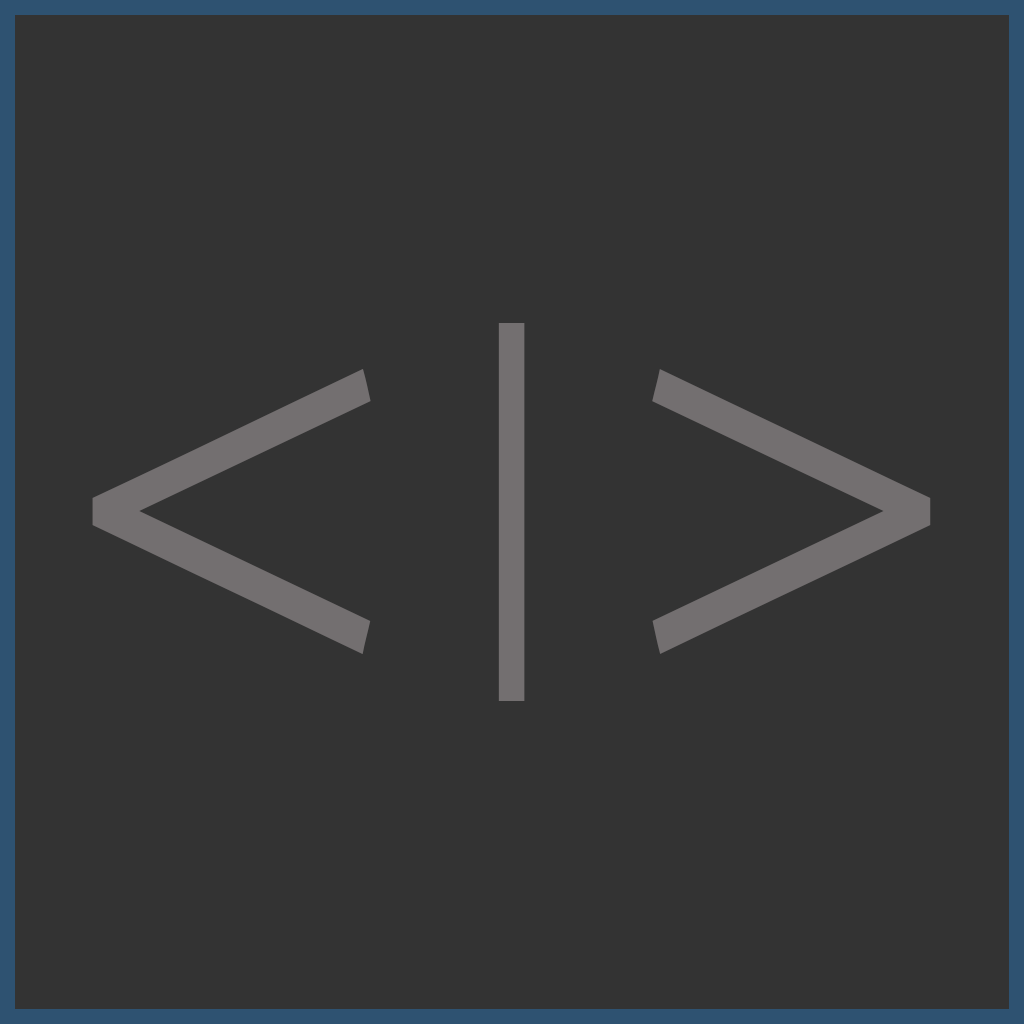
<style>
.page{position:relative;width:1024px;height:1024px;background:#333333}
.page>*{position:absolute;margin:0}
.t1{font:675px "Microsoft-Yi-Baiti";color:#736f70}
</style>
<div class="page">
<p class="t1" style="left:92px;top:323px;width:839px;height:378px">&lt;|&gt;</p>
</div>
